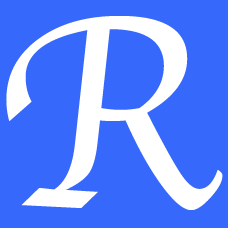
<style>
.page{position:relative;width:228px;height:228px;background:#3669fb}
.page>*{position:absolute;margin:0}
.t1{font:280px "Apple-Chancery";color:#ffffff}
</style>
<div class="page">
<p class="t1" style="left:6px;top:16px;width:217px;height:194px">R</p>
</div>
